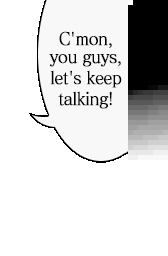
<style>
.page{position:relative;width:168px;height:256px;background:#ffffff}
.page>*{position:absolute;margin:0}
.t1{font:17.6px/21px "MatissePro-M";letter-spacing:-0.05em;color:#000000;font-weight:bold;scale:0.91 1}
.t2{font:17.6px/16px "MatissePro-M";letter-spacing:-0.05em;color:#000000;font-weight:bold;scale:0.91 1}
.t3{font:17.6px/18px "MatissePro-M";letter-spacing:-0.05em;color:#000000;font-weight:bold;scale:0.91 1}
</style>
<div class="page">
<p class="t1" style="left:49px;top:31px;width:73px;height:78px;text-align:center"><span class="t2">C'mon,<br></span><span class="t3">you guys,<br></span>let's keep<br>talking!</p>
</div>
